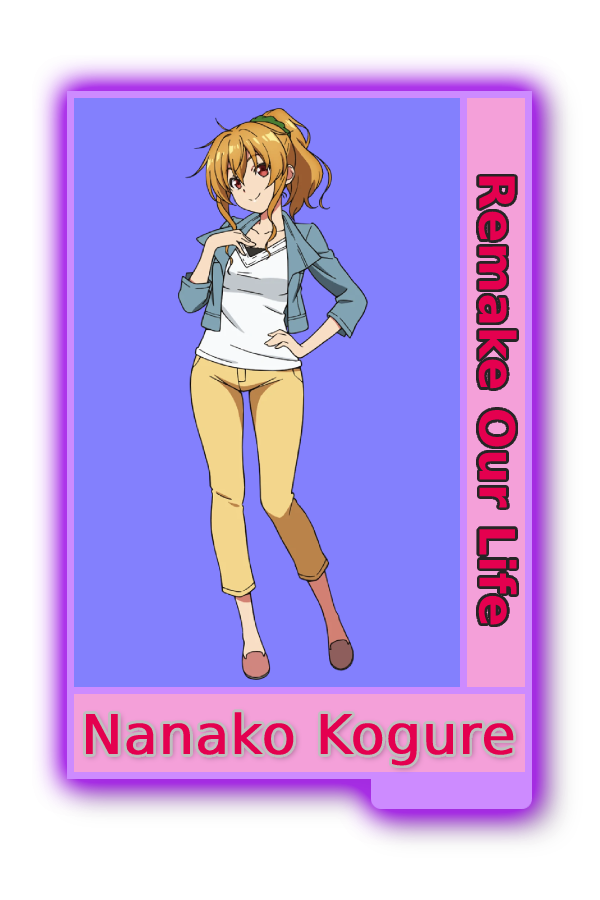
<style>
.page{position:relative;width:600px;height:900px;background:#8380fd}
.page>*{position:absolute;margin:0}
.t1{font:48.8px "MADETOMMY-Bold";color:#e4004f}
.t2{font:55px "CoolveticaRg-Regular";color:#e4004f;font-weight:bold}
</style>
<div class="page">
<p class="t1" style="left:478px;top:176px;width:39px;height:449px;rotate:90deg">Remake Our Life</p>
<p class="t2" style="left:85px;top:712px;width:429px;height:54px">Nanako Kogure</p>
</div>
